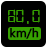
<style>
.page{position:relative;width:48px;height:48px;background:#010101}
.page>*{position:absolute;margin:0}
.t1{font:18px "Digital-7Mono";color:#36a101}
.t2{font:12px "Ebrima";color:#000000;font-weight:bold}
</style>
<div class="page">
<p class="t1" style="left:8px;top:9px;width:32px;height:15px">80,0</p>
<p class="t2" style="left:10px;top:27px;width:29px;height:12px">km/h</p>
</div>
